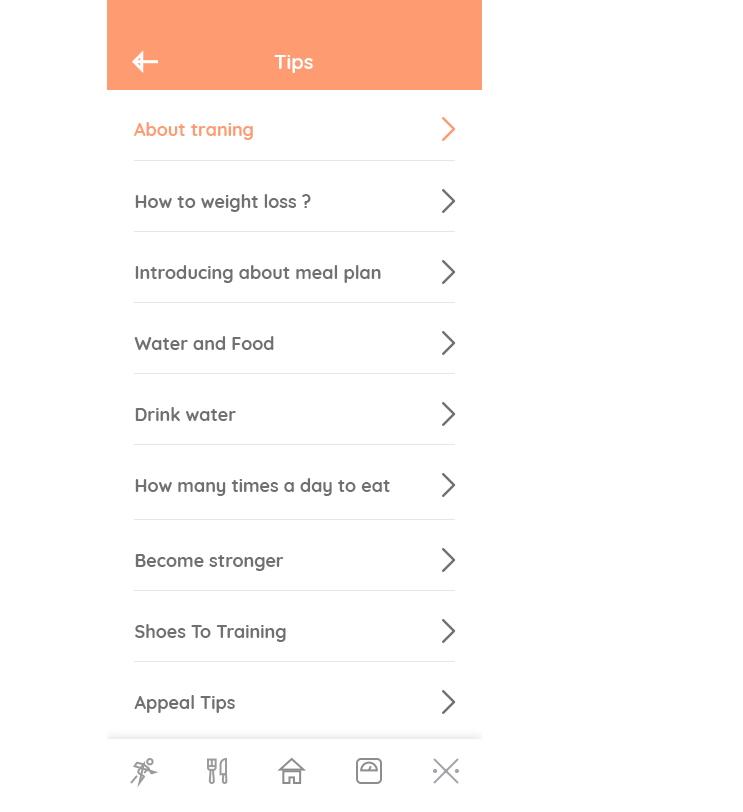
<style>
.page{position:relative;width:743px;height:812px;background:#ffffff}
.page>*{position:absolute;margin:0}
.t1{font:20px "Quicksand-Bold";color:#ffffff}
.t2{font:18px "Quicksand-Bold";color:#ff9b70}
.t3{font:18px "Quicksand-Bold";color:#707070}
</style>
<div class="page">
<p class="t1" style="left:274px;top:55px;width:39px;height:18px">Tips</p>
<p class="t2" style="left:134px;top:122px;width:119px;height:18px">About traning</p>
<p class="t3" style="left:135px;top:194px;width:176px;height:18px">How to weight loss ?</p>
<p class="t3" style="left:135px;top:265px;width:246px;height:18px">Introducing about meal plan</p>
<p class="t3" style="left:134px;top:336px;width:140px;height:14px">Water and Food</p>
<p class="t3" style="left:135px;top:407px;width:101px;height:14px">Drink water</p>
<p class="t3" style="left:135px;top:478px;width:255px;height:18px">How many times a day to eat</p>
<p class="t3" style="left:135px;top:554px;width:149px;height:17px">Become stronger</p>
<p class="t3" style="left:135px;top:624px;width:151px;height:18px">Shoes To Training</p>
<p class="t3" style="left:134px;top:695px;width:101px;height:18px">Appeal Tips</p>
</div>
